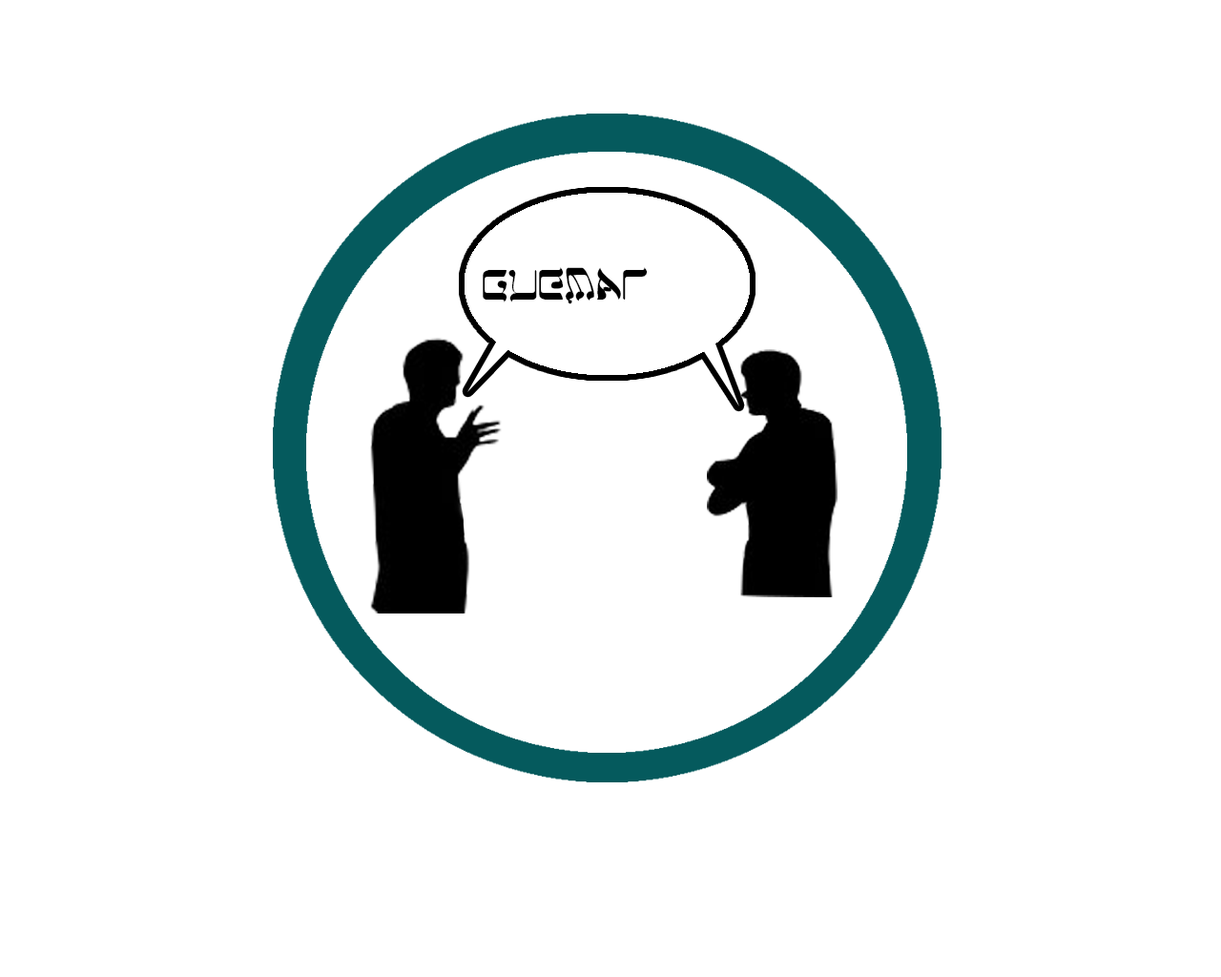
<style>
.page{position:relative;width:1221px;height:977px;background:#ffffff}
.page>*{position:absolute;margin:0}
.t1{font:57.2px "Jerusalem";color:#000000}
</style>
<div class="page">
<p class="t1" style="left:483px;top:267px;width:165px;height:37px">Guemar</p>
</div>
